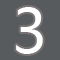
<style>
.page{position:relative;width:60px;height:60px;background:#585b5d}
.page>*{position:absolute;margin:0}
.t1{font:60px "MicrosoftYaHei";color:#ffffff}
</style>
<div class="page">
<p class="t1" style="left:16px;top:7px;width:27px;height:47px">3</p>
</div>
